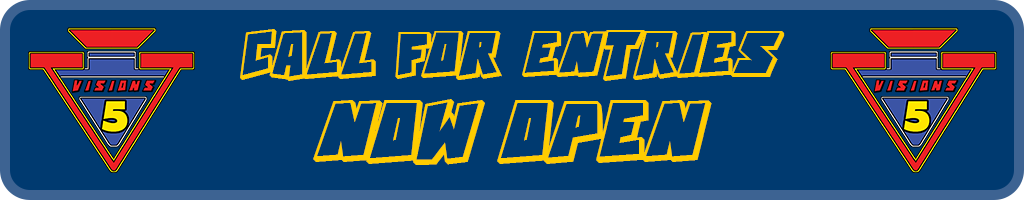
<style>
.page{position:relative;width:1024px;height:200px;background:#003a70}
.page>*{position:absolute;margin:0}
.t1{font:28.9px "ActionComics";color:#ffcc00}
.t2{font:38.9px "ActionComics";color:#ffcc00}
</style>
<div class="page">
<p class="t1" style="left:240px;top:29px;width:545px;height:136px;text-align:center">CALL  FOR  ENTRIES <br><br><span class="t2">NOW OPEN</span></p>
</div>
